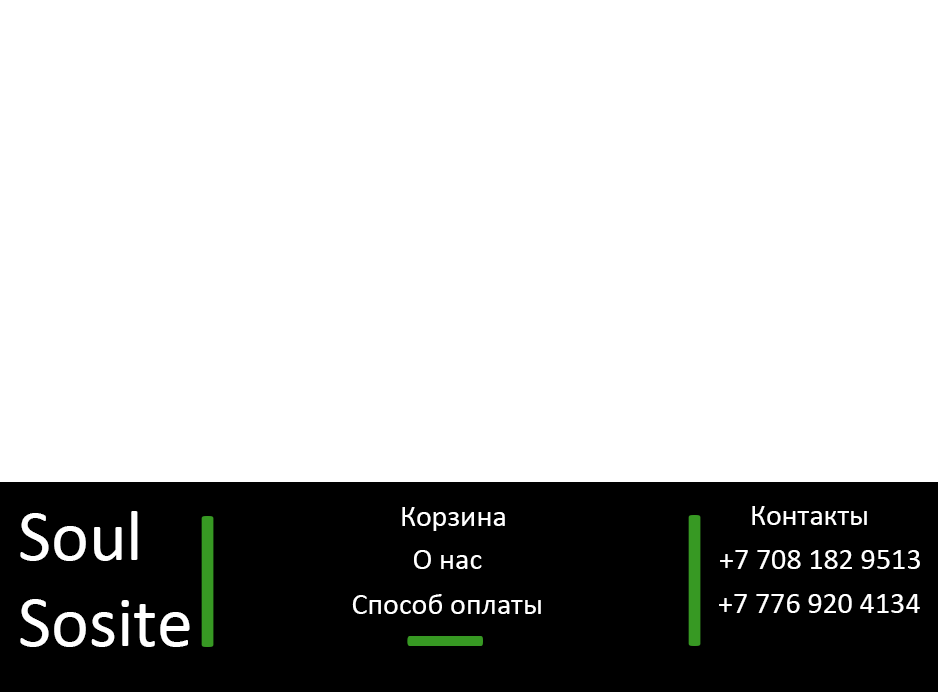
<style>
.page{position:relative;width:938px;height:692px;background:#ffffff}
.page>*{position:absolute;margin:0}
.t1{font:30px "Calibri";color:#ffffff}
.t2{font:72px "Calibri";color:#ffffff}
.t3{font:150px "Calibri";color:#379923}
</style>
<div class="page">
<p class="t1" style="left:402px;top:507px;width:103px;height:24px">Корзина</p>
<p class="t1" style="left:752px;top:506px;width:115px;height:19px">Контакты</p>
<p class="t2" style="left:20px;top:511px;width:170px;height:136px">Soul <br>Sosite</p>
<p class="t3" style="left:201px;top:516px;width:13px;height:131px">|</p>
<p class="t3" style="left:688px;top:515px;width:13px;height:131px">|</p>
<p class="t1" style="left:414px;top:550px;width:68px;height:19px">О нас</p>
<p class="t1" style="left:720px;top:550px;width:200px;height:19px">+7 708 182 9513</p>
<p class="t1" style="left:352px;top:594px;width:189px;height:20px">Способ оплаты</p>
<p class="t1" style="left:719px;top:594px;width:201px;height:19px">+7 776 920 4134</p>
<p class="t3" style="left:407px;top:636px;width:76px;height:10px">_</p>
</div>
